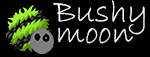
<style>
.page{position:relative;width:150px;height:57px;background:#000000}
.page>*{position:absolute;margin:0}
.t1{font:33.3px "BradleyHandITC";color:#ffffff}
</style>
<div class="page">
<p class="t1" style="left:53px;top:0px;width:92px;height:35px">Bushy</p>
<p class="t1" style="left:58px;top:27px;width:75px;height:17px">moon</p>
</div>
